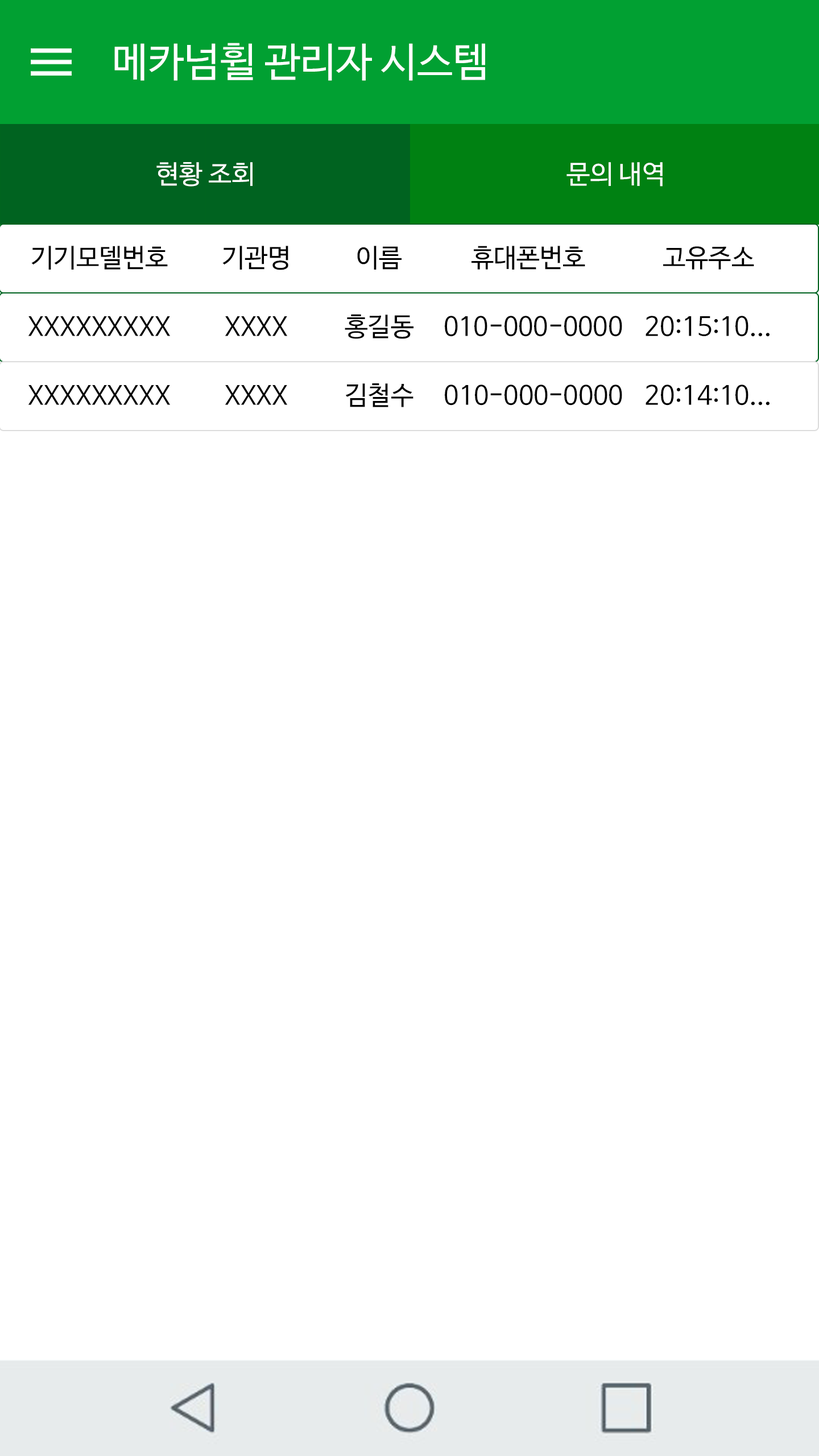
<style>
.page{position:relative;width:819px;height:1456px;background:#ffffff}
.page>*{position:absolute;margin:0}
.t1{font:40.3px "NanumBarunGothicOTF";color:#ffffff}
.t2{font:26.1px "NanumBarunGothicOTF";color:#ffffff}
.t3{font:26.1px "NanumBarunGothicOTF";letter-spacing:-0.005em;color:#000000}
</style>
<div class="page">
<p class="t1" style="left:114px;top:43px;width:371px;height:38px">메카넘휠 관리자 시스템</p>
<p class="t2" style="left:156px;top:162px;width:97px;height:25px">현황 조회</p>
<p class="t2" style="left:566px;top:162px;width:97px;height:25px">문의 내역</p>
<p class="t3" style="left:31px;top:246px;width:137px;height:24px">기기모델번호</p>
<p class="t3" style="left:222px;top:246px;width:66px;height:24px">기관명</p>
<p class="t3" style="left:357px;top:246px;width:45px;height:24px">이름</p>
<p class="t3" style="left:471px;top:246px;width:114px;height:24px">휴대폰번호</p>
<p class="t3" style="left:663px;top:246px;width:91px;height:24px">고유주소</p>
<p class="t3" style="left:28px;top:316px;width:142px;height:20px">XXXXXXXXX</p>
<p class="t3" style="left:225px;top:316px;width:62px;height:20px">XXXX</p>
<p class="t3" style="left:345px;top:314px;width:68px;height:25px">홍길동</p>
<p class="t3" style="left:445px;top:316px;width:177px;height:21px">010-000-0000</p>
<p class="t3" style="left:646px;top:316px;width:124px;height:21px">20:15:10...</p>
<p class="t3" style="left:28px;top:384px;width:142px;height:21px">XXXXXXXXX</p>
<p class="t3" style="left:225px;top:384px;width:62px;height:21px">XXXX</p>
<p class="t3" style="left:345px;top:383px;width:68px;height:24px">김철수</p>
<p class="t3" style="left:445px;top:384px;width:177px;height:22px">010-000-0000</p>
<p class="t3" style="left:646px;top:384px;width:124px;height:22px">20:14:10...</p>
</div>
